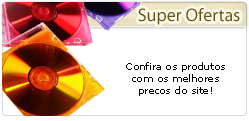
<style>
.page{position:relative;width:249px;height:121px;background:#ffffff}
.page>*{position:absolute;margin:0}
.t1{font:18px "MyriadPro-Regular";color:#685518}
.t2{font:10px "Verdana";color:#000000}
</style>
<div class="page">
<p class="t1" style="left:138px;top:8px;width:102px;height:17px">Super Ofertas</p>
<p class="t2" style="left:126px;top:62px;width:99px;height:34px;text-align:center">Confira os produtos<br>com os melhores<br>precos do site!</p>
</div>
